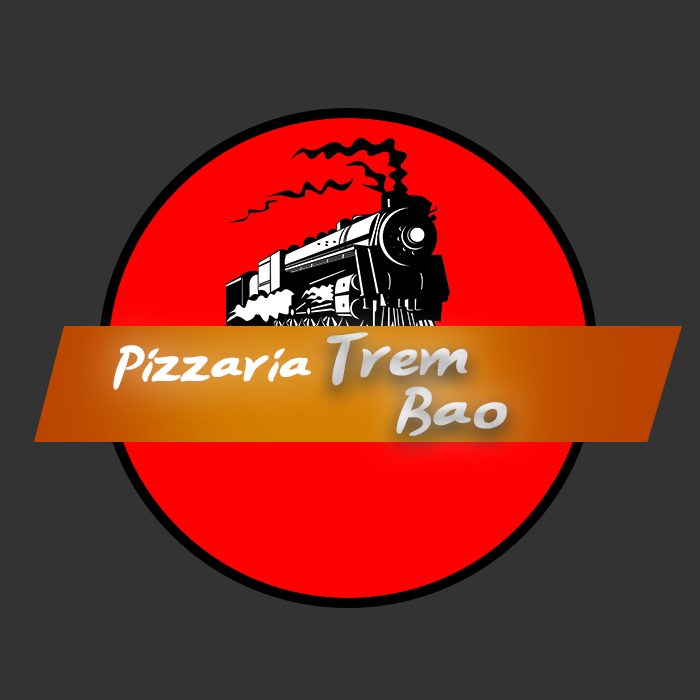
<style>
.page{position:relative;width:700px;height:700px;background:#333333}
.page>*{position:absolute;margin:0}
.t1{font:30px/53px "OrderPizza";letter-spacing:0.075em;color:#d0d0d0;font-weight:bold}
.t2{font:25px "OrderPizza";letter-spacing:0.075em;color:#fefefe;font-weight:bold}
</style>
<div class="page">
<p class="t1" style="left:327px;top:332px;width:180px;height:104px;text-align:center">Trem<br>   Bão</p>
<p class="t2" style="left:113px;top:345px;width:198px;height:45px;text-align:center">Pizzaria</p>
</div>
